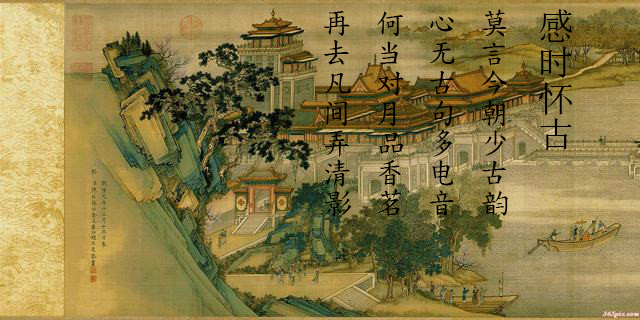
<style>
.page{position:relative;width:640px;height:320px}
.page>*{position:absolute;margin:0}
.t1{font:30px "DFKaiShu-SB-Estd-BF";color:#000000}
.t2{font:36px "SimSun";color:#000000}
</style>
<div class="page">
<p class="t1" style="left:324px;top:9px;width:249px;height:208px"><span class="t2">感时怀古<br></span>莫言今朝少古韵<br>心无古句多电音<br>何当对月品香茗<br>再去凡间弄清影</p>
</div>
